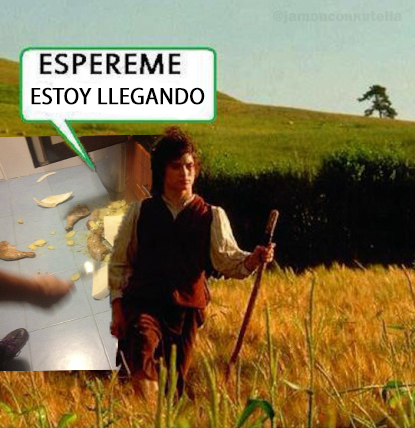
<style>
.page{position:relative;width:415px;height:428px}
.page>*{position:absolute;margin:0}
.t1{font:14.9px "FranklinGothic-Heavy";color:#aabfb4}
.t2{font:23.6px "MyriadPro-Regular";color:#000000;font-weight:bold;scale:0.93 1}
</style>
<div class="page">
<p class="t1" style="left:273px;top:10px;width:129px;height:14px">@jamonconnutella</p>
<p class="t2" style="left:31px;top:87px;width:174px;height:18px">ESTOY LLEGANDO</p>
</div>
